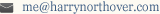
<style>
.page{position:relative;width:160px;height:14px;background:#fdfaf2}
.page>*{position:absolute;margin:0}
.t1{font:13px "Georgia";color:#3c5c83;scale:0.94 1}
</style>
<div class="page">
<p class="t1" style="left:22px;top:1px;width:137px;height:13px">me@harrynorthover.com</p>
</div>
